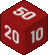
<style>
.page{position:relative;width:48px;height:55px;background:#ffffff}
.page>*{position:absolute;margin:0}
.t1{font:16.7px "RoughMotion";color:#e5dbdb;scale:1.39 1}
.t2{font:16.7px "RoughMotion";color:#dbd2d2;scale:1.32 1}
.t3{font:16.7px "RoughMotion";color:#b0a9a9;scale:1.35 1}
</style>
<div class="page">
<p class="t1" style="left:13px;top:6px;width:23px;height:14px;rotate:28deg">50</p>
<p class="t2" style="left:4px;top:25px;width:15px;height:19px;rotate:33deg">20</p>
<p class="t3" style="left:31px;top:27px;width:12px;height:16px;rotate:-28deg">10</p>
</div>
